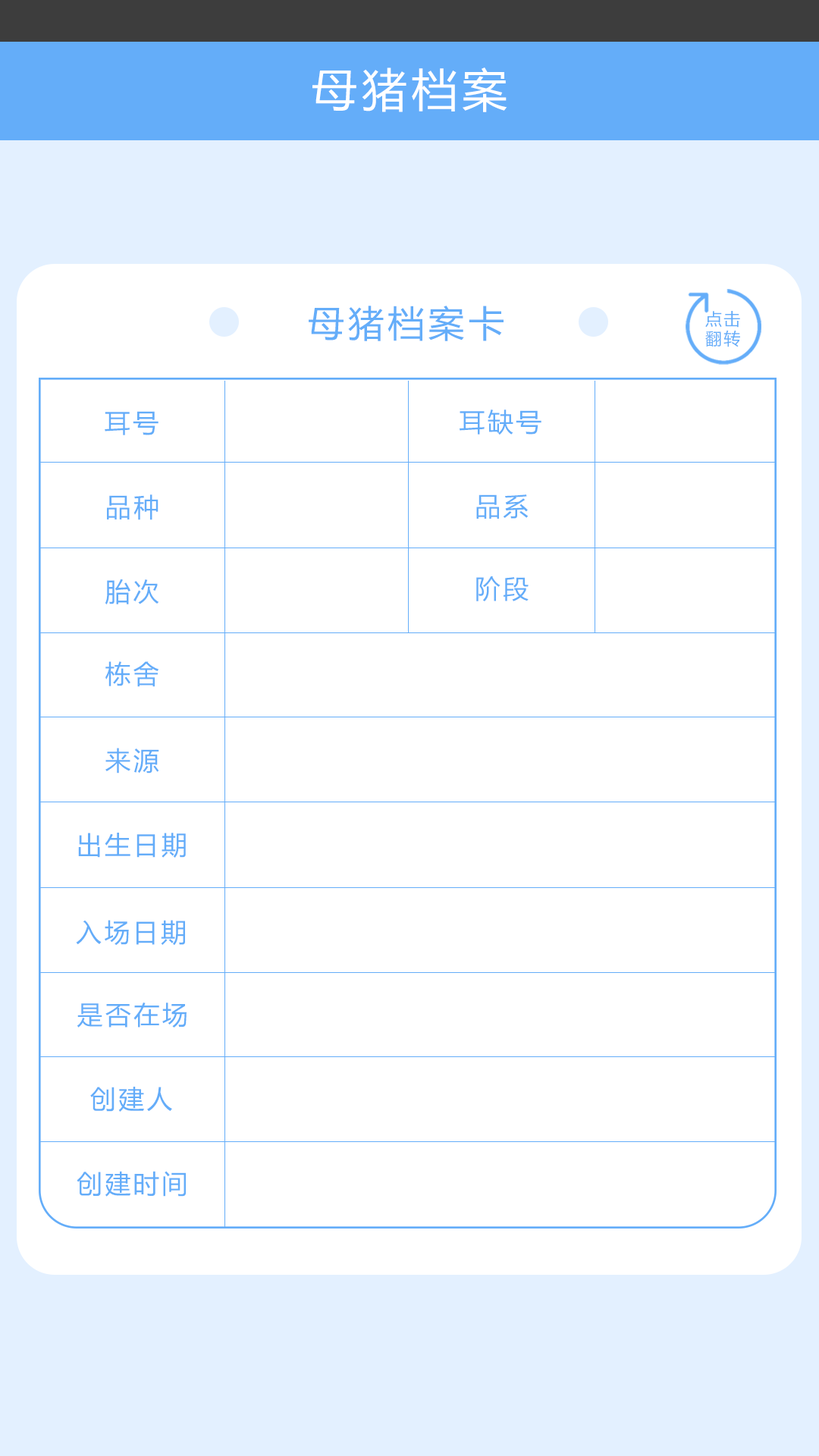
<style>
.page{position:relative;width:819px;height:1456px;background:#ffffff}
.page>*{position:absolute;margin:0}
.t1{font:45.5px "MicrosoftYaHei";letter-spacing:0.1em;color:#ffffff}
.t2{font:36.4px "MicrosoftYaHei";letter-spacing:0.1em;color:#64adf9}
.t3{font:16.7px "MicrosoftYaHei";letter-spacing:0.1em;color:#64adf9}
.t4{font:25.8px "MicrosoftYaHei";letter-spacing:0.1em;color:#64adf9}
</style>
<div class="page">
<p class="t1" style="left:312px;top:67px;width:195px;height:45px">母猪档案</p>
<p class="t2" style="left:309px;top:306px;width:195px;height:35px">母猪档案卡</p>
<p class="t3" style="left:705px;top:311px;width:35px;height:17px">点击</p>
<p class="t3" style="left:705px;top:330px;width:35px;height:17px">翻转</p>
<p class="t4" style="left:105px;top:411px;width:53px;height:24px">耳号</p>
<p class="t4" style="left:460px;top:409px;width:81px;height:26px">耳缺号</p>
<p class="t4" style="left:107px;top:494px;width:51px;height:26px">品种</p>
<p class="t4" style="left:476px;top:494px;width:53px;height:25px">品系</p>
<p class="t4" style="left:105px;top:579px;width:54px;height:25px">胎次</p>
<p class="t4" style="left:476px;top:576px;width:53px;height:25px">阶段</p>
<p class="t4" style="left:105px;top:661px;width:54px;height:26px">栋舍</p>
<p class="t4" style="left:105px;top:748px;width:54px;height:25px">来源</p>
<p class="t4" style="left:78px;top:833px;width:108px;height:25px">出生日期</p>
<p class="t4" style="left:76px;top:920px;width:109px;height:26px">入场日期</p>
<p class="t4" style="left:77px;top:1003px;width:110px;height:25px">是否在场</p>
<p class="t4" style="left:90px;top:1087px;width:82px;height:25px">创建人</p>
<p class="t4" style="left:77px;top:1171px;width:109px;height:26px">创建时间</p>
</div>
